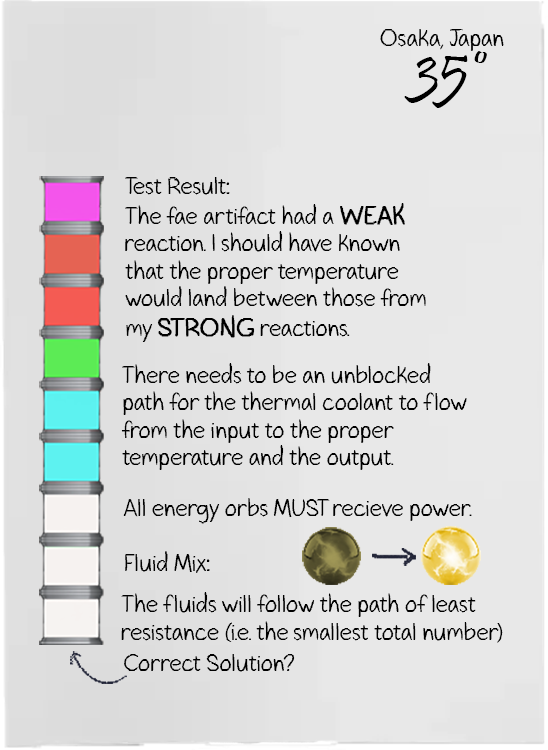
<style>
.page{position:relative;width:548px;height:750px;background:#e8e8e8}
.page>*{position:absolute;margin:0}
.t1{font:22.8px "GavinScript2";color:#000000}
.t2{font:68.5px "Pristina-Regular";color:#000000}
.t3{font:25.1px "GavinScript2";color:#000000;font-weight:bold}
</style>
<div class="page">
<p class="t1" style="left:380px;top:29px;width:124px;height:22px">Osaka, Japan</p>
<p class="t2" style="left:404px;top:51px;width:83px;height:57px">35°</p>
<p class="t1" style="left:125px;top:177px;width:301px;height:165px">Test Result:<br>The fae artifact had a <span class="t3">WEAK </span>reaction. I should have known that the proper temperature would land between those from my <span class="t3">STRONG</span> reactions.</p>
<p class="t1" style="left:121px;top:363px;width:346px;height:107px">There needs to be an unblocked path for the thermal coolant to flow from the input to the proper temperature and the output.</p>
<p class="t1" style="left:123px;top:498px;width:349px;height:26px">All energy orbs MUST recieve power.</p>
<p class="t1" style="left:125px;top:551px;width:85px;height:22px">Fluid Mix:</p>
<p class="t1" style="left:121px;top:592px;width:382px;height:51px">The fluids will follow the path of least resistance (i.e. the smallest total number)</p>
<p class="t1" style="left:124px;top:654px;width:171px;height:18px">Correct Solution?</p>
</div>
